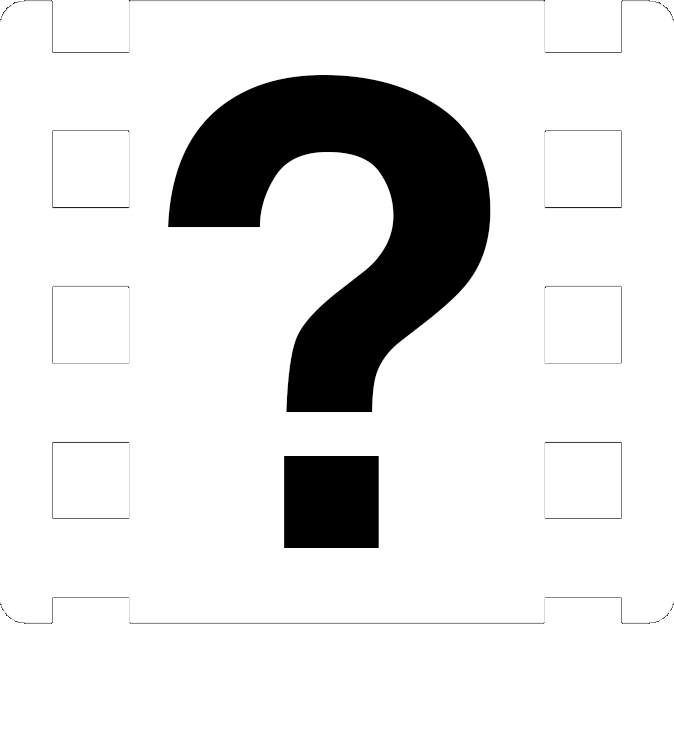
<style>
.page{position:relative;width:674px;height:745px;background:#ffffff}
.page>*{position:absolute;margin:0}
.t1{font:650.7px "Helvetica-Bold";color:#000000}
</style>
<div class="page">
<p class="t1" style="left:168px;top:75px;width:323px;height:473px">?</p>
</div>
